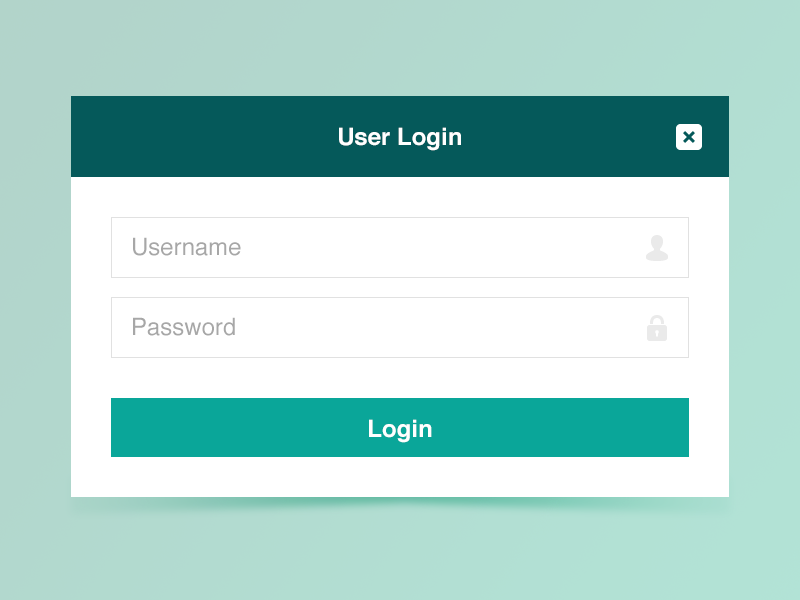
<style>
.page{position:relative;width:800px;height:600px;background:#ffffff}
.page>*{position:absolute;margin:0}
.t1{font:24px "Helvetica-Bold";color:#ffffff}
.t2{font:24px "Helvetica";color:#a7a7a7}
</style>
<div class="page">
<p class="t1" style="left:339px;top:127px;width:122px;height:24px">User Login</p>
<p class="t2" style="left:133px;top:237px;width:108px;height:19px">Username</p>
<p class="t2" style="left:133px;top:317px;width:102px;height:19px">Password</p>
<p class="t1" style="left:369px;top:419px;width:63px;height:24px">Login</p>
</div>
